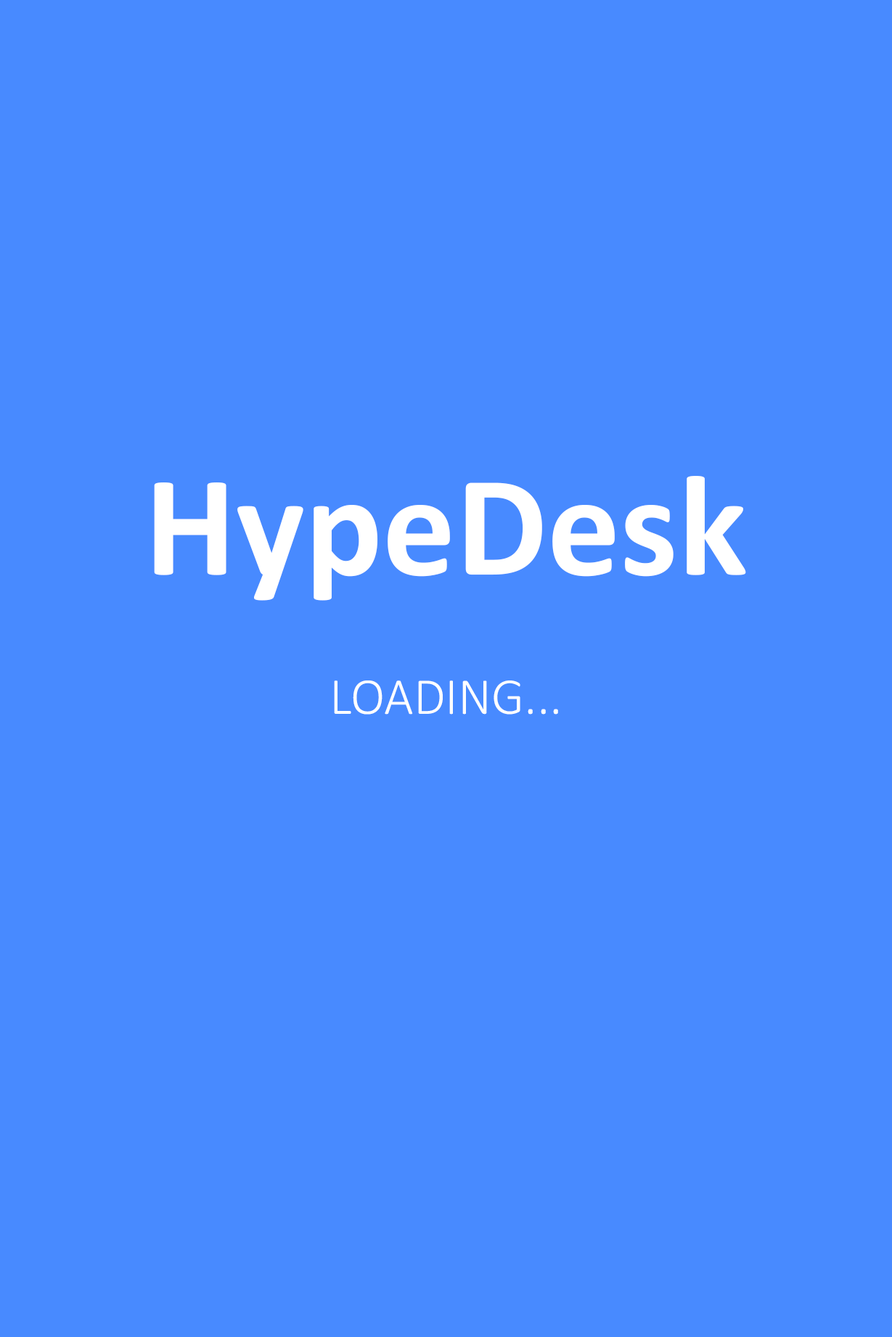
<style>
.page{position:relative;width:892px;height:1337px;background:#488aff}
.page>*{position:absolute;margin:0}
.t1{font:145.1px "Calibri-Bold";color:#ffffff}
.t2{font:52.2px "Calibri-Light";color:#ffffff}
</style>
<div class="page">
<p class="t1" style="left:154px;top:476px;width:592px;height:125px">HypeDesk</p>
<p class="t2" style="left:334px;top:681px;width:224px;height:34px">LOADING...</p>
</div>
